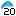
<style>
.page{position:relative;width:16px;height:16px;background:#ffffff}
.page>*{position:absolute;margin:0}
.t1{font:8px "PFTempestaSeven";color:#000000}
</style>
<div class="page">
<p class="t1" style="left:4px;top:8px;width:11px;height:7px">20</p>
</div>
